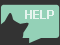
<style>
.page{position:relative;width:60px;height:45px;background:#94d1b7}
.page>*{position:absolute;margin:0}
.t1{font:12px "Arial-BoldMT";color:#e6f4ee}
</style>
<div class="page">
<p class="t1" style="left:25px;top:10px;width:29px;height:9px">HELP</p>
</div>
